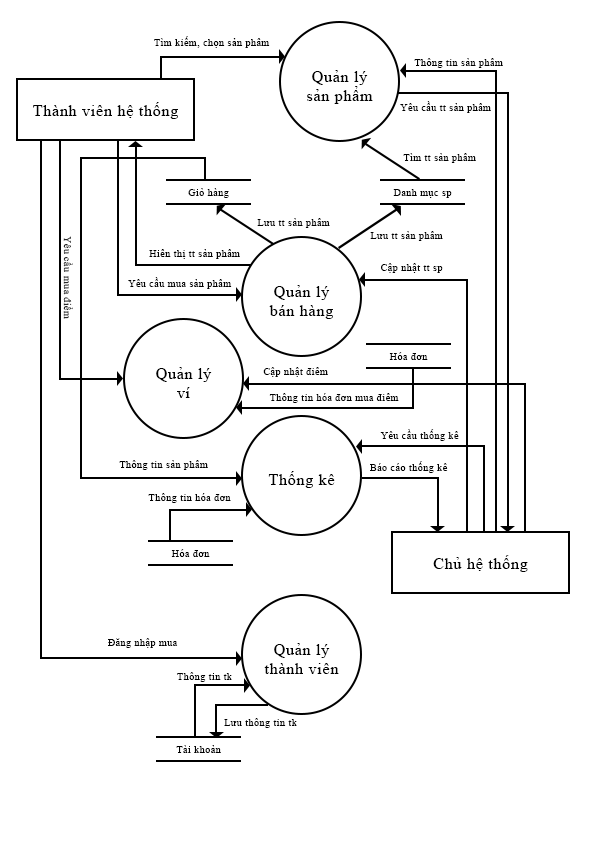
<style>
.page{position:relative;width:595px;height:842px;background:#ffffff}
.page>*{position:absolute;margin:0}
.t1{font:10px "TimesNewRomanPSMT";letter-spacing:0.05em;color:#000000}
.t2{font:15.9px "TimesNewRomanPSMT";letter-spacing:0.05em;color:#000000}
.t3{font:10px "TimesNewRomanPSMT";letter-spacing:0.05em}
</style>
<div class="page">
<p class="t1" style="left:154px;top:36px;width:116px;height:12px">Tìm kiếm, chọn sản phẩm</p>
<p class="t1" style="left:414px;top:58px;width:89px;height:10px">Thông tin sản phẩm</p>
<p class="t2" style="left:307px;top:70px;width:66px;height:34px;text-align:center">Quản lý<br>sản phẩm</p>
<p class="t2" style="left:33px;top:102px;width:145px;height:17px">Thành viên hệ thống</p>
<p class="t1" style="left:400px;top:101px;width:91px;height:12px">Yêu cầu tt sản phẩm</p>
<p class="t1" style="left:403px;top:153px;width:73px;height:10px">Tìm tt sản phẩm</p>
<p class="t1" style="left:188px;top:188px;width:41px;height:10px">Giỏ hàng</p>
<p class="t1" style="left:393px;top:189px;width:59px;height:9px">Danh mục sp</p>
<p class="t1" style="left:257px;top:218px;width:73px;height:10px">Lưu tt sản phẩm</p>
<p class="t1" style="left:370px;top:231px;width:73px;height:10px">Lưu tt sản phẩm</p>
<p class="t3" style="left:63px;top:236px;width:10px;height:83px;rotate:90deg">Yêu cầu mua điểm</p>
<p class="t1" style="left:149px;top:249px;width:91px;height:10px">Hiển thị tt sản phẩm</p>
<p class="t1" style="left:381px;top:263px;width:62px;height:10px">Cập nhật tt sp</p>
<p class="t1" style="left:128px;top:277px;width:104px;height:12px">Yêu cầu mua sản phẩm</p>
<p class="t2" style="left:269px;top:285px;width:64px;height:34px;text-align:center">Quản lý<br>bán hàng</p>
<p class="t1" style="left:389px;top:352px;width:39px;height:8px">Hóa đơn</p>
<p class="t2" style="left:156px;top:367px;width:56px;height:31px;text-align:center">Quản lý<br>ví</p>
<p class="t1" style="left:263px;top:367px;width:65px;height:10px">Cập nhật điểm</p>
<p class="t1" style="left:269px;top:393px;width:130px;height:10px">Thông tin hóa đơn mua điểm</p>
<p class="t1" style="left:380px;top:429px;width:79px;height:12px">Yêu cầu thống kê</p>
<p class="t1" style="left:119px;top:460px;width:89px;height:10px">Thông tin sản phẩm</p>
<p class="t1" style="left:370px;top:461px;width:78px;height:12px">Báo cáo thống kê</p>
<p class="t2" style="left:268px;top:471px;width:67px;height:17px">Thống kê</p>
<p class="t1" style="left:148px;top:493px;width:83px;height:10px">Thông tin hóa đơn</p>
<p class="t1" style="left:171px;top:549px;width:39px;height:8px">Hóa đơn</p>
<p class="t2" style="left:433px;top:555px;width:95px;height:17px">Chủ hệ thống</p>
<p class="t1" style="left:108px;top:638px;width:70px;height:10px">Đăng nhập mua</p>
<p class="t2" style="left:264px;top:643px;width:75px;height:31px;text-align:center">Quản lý<br>thành viên</p>
<p class="t1" style="left:177px;top:672px;width:55px;height:10px">Thông tin tk</p>
<p class="t1" style="left:224px;top:718px;width:73px;height:10px">Lưu thông tin tk</p>
<p class="t1" style="left:176px;top:745px;width:45px;height:8px">Tài khoản</p>
</div>
